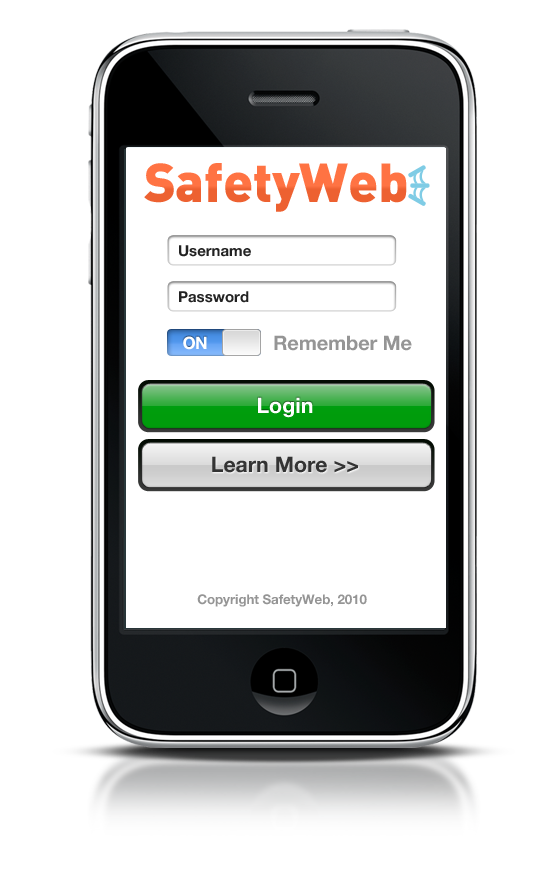
<style>
.page{position:relative;width:555px;height:876px;background:#ffffff}
.page>*{position:absolute;margin:0}
.t1{font:54px "DIN-Black";letter-spacing:-0.006em;color:#ff6835}
.t2{font:15px "HelveticaNeueBold";color:#222222}
.t3{font:17px "HelveticaNeue-Bold";letter-spacing:-0.04em;color:#ffffff}
.t4{font:20px "HelveticaNeueBold";letter-spacing:-0.006em;color:#959595}
.t5{font:21.3px "HelveticaNeueBold";color:#ffffff}
.t6{font:21.3px "HelveticaNeueBold";color:#333333}
.t7{font:13.3px "HelveticaNeueBold";letter-spacing:-0.006em;color:#959595}
</style>
<div class="page">
<p class="t1" style="left:144px;top:163px;width:263px;height:49px">SafetyWeb</p>
<p class="t2" style="left:179px;top:245px;width:72px;height:12px">Username</p>
<p class="t2" style="left:179px;top:291px;width:70px;height:12px">Password</p>
<p class="t3" style="left:183px;top:336px;width:24px;height:14px">ON</p>
<p class="t4" style="left:274px;top:335px;width:138px;height:16px">Remember Me</p>
<p class="t5" style="left:258px;top:397px;width:55px;height:21px">Login</p>
<p class="t6" style="left:212px;top:456px;width:146px;height:17px">Learn More &gt;&gt;</p>
<p class="t7" style="left:197px;top:594px;width:170px;height:13px">Copyright SafetyWeb, 2010</p>
</div>
